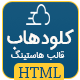
<style>
.page{position:relative;width:80px;height:80px}
.page>*{position:absolute;margin:0}
.t1{font:23.5px "IRANSans-Bold";color:#fcfaf5;scale:0.94 1}
.t2{font:12px "IRANSans";color:#f0f5f7}
.t3{font:16px "ChaparralPro-Regular";color:#094e76}
</style>
<div class="page">
<p class="t1" style="left:7px;top:29px;width:67px;height:21px">کلودهاب</p>
<p class="t2" style="left:11px;top:50px;width:54px;height:10px">قالب هاستینگ</p>
<p class="t3" style="left:18px;top:67px;width:43px;height:11px">HTML</p>
</div>
